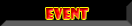
<style>
.page{position:relative;width:132px;height:26px;background:#000000}
.page>*{position:absolute;margin:0}
.t1{font:14px "ShowcardGothic-Reg"}
</style>
<div class="page">
<p class="t1" style="left:46px;top:8px;width:43px;height:11px">EVENT</p>
</div>
